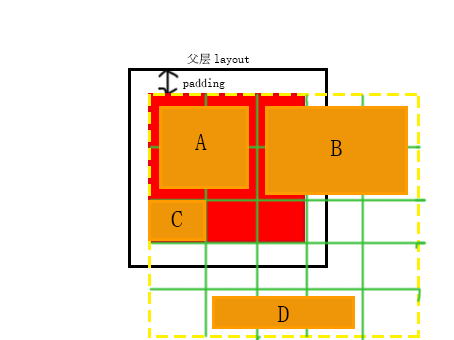
<style>
.page{position:relative;width:454px;height:340px;background:#ffffff}
.page>*{position:absolute;margin:0}
.t1{font:12px "SimSun";color:#000000}
.t2{font:24px "SimSun";color:#000000}
</style>
<div class="page">
<p class="t1" style="left:187px;top:53px;width:63px;height:12px">父层layout</p>
<p class="t1" style="left:183px;top:78px;width:42px;height:11px">padding</p>
<p class="t2" style="left:195px;top:134px;width:12px;height:16px">A</p>
<p class="t2" style="left:330px;top:140px;width:12px;height:16px">B</p>
<p class="t2" style="left:171px;top:211px;width:12px;height:16px">C</p>
<p class="t2" style="left:277px;top:306px;width:12px;height:16px">D</p>
</div>
